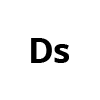
<style>
.page{position:relative;width:100px;height:100px;background:#ffffff}
.page>*{position:absolute;margin:0}
.t1{font:35px "OpenSans-Bold";color:#000000}
</style>
<div class="page">
<p class="t1" style="left:31px;top:38px;width:38px;height:25px">Ds</p>
</div>
